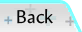
<style>
.page{position:relative;width:82px;height:32px}
.page>*{position:absolute;margin:0}
.t1{font:18.7px "Amira-Roman";color:#000000}
</style>
<div class="page">
<p class="t1" style="left:17px;top:9px;width:36px;height:15px;opacity:0.96">Back</p>
</div>
